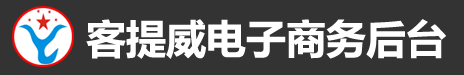
<style>
.page{position:relative;width:464px;height:75px;background:#333333}
.page>*{position:absolute;margin:0}
.t1{font:40px "MicrosoftYaHei-Bold";color:#ffffff}
</style>
<div class="page">
<p class="t1" style="left:86px;top:19px;width:360px;height:40px">客提威电子商务后台</p>
</div>
